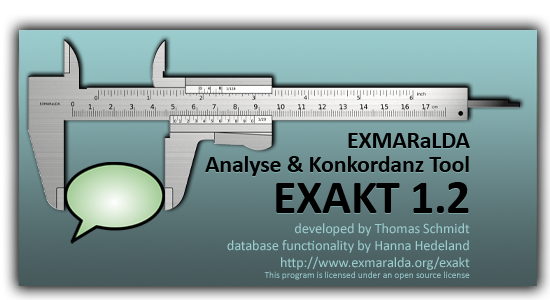
<style>
.page{position:relative;width:550px;height:300px}
.page>*{position:absolute;margin:0}
.t1{font:23.8px/23.8px "Calibri-Bold";letter-spacing:-0.005em;color:#010101}
.t2{font:47.6px "Calibri-Bold";letter-spacing:-0.005em;color:#000000}
.t3{font:14.3px "Calibri";letter-spacing:-0.005em;color:#9bccce}
.t4{font:9.5px "Calibri";letter-spacing:-0.005em;color:#9bccce}
</style>
<div class="page">
<p class="t1" style="left:205px;top:134px;width:265px;height:43px;text-align:right">EXMARaLDA<br>Analyse &amp; Konkordanz Tool</p>
<p class="t1" style="left:205px;top:133px;width:265px;height:43px;text-align:right">EXMARaLDA<br>Analyse &amp; Konkordanz Tool</p>
<p class="t2" style="left:276px;top:183px;width:193px;height:31px">EXAKT 1.2</p>
<p class="t2" style="left:276px;top:182px;width:193px;height:31px">EXAKT 1.2</p>
<p class="t3" style="left:227px;top:223px;width:243px;height:57px;text-align:right">developed by Thomas Schmidt<br>database functionality by Hanna Hedeland<br>http://www.exmaralda.org/exakt<br><span class="t4">This program is licensed under an open source license</span></p>
</div>
